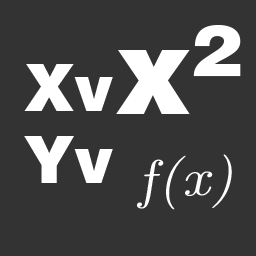
<style>
.page{position:relative;width:256px;height:256px;background:#333333}
.page>*{position:absolute;margin:0}
.t1{font:120px "HelveticaBlack";color:#ffffff}
.t2{font:63.2px "HelveticaBlack";color:#ffffff}
.t3{font:53px "CMUClassicalSerif-Italic";color:#ffffff;scale:1.15 1}
</style>
<div class="page">
<p class="t1" style="left:116px;top:25px;width:125px;height:89px">x²</p>
<p class="t2" style="left:24px;top:64px;width:89px;height:47px">Xv</p>
<p class="t2" style="left:24px;top:136px;width:89px;height:47px">Yv</p>
<p class="t3" style="left:137px;top:154px;width:95px;height:56px;rotate:-3deg">f(x)</p>
</div>
